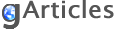
<style>
.page{position:relative;width:115px;height:29px;background:#ffffff}
.page>*{position:absolute;margin:0}
.t1{font:23.6px "LucidaSans";color:#555555;font-weight:bold}
</style>
<div class="page">
<p class="t1" style="left:22px;top:0px;width:92px;height:19px">Articles</p>
</div>
